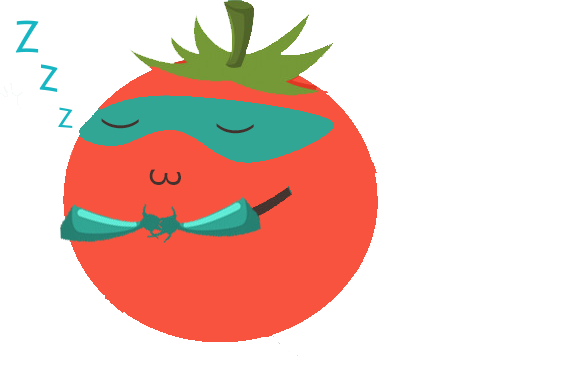
<style>
.page{position:relative;width:562px;height:381px;background:#ffffff}
.page>*{position:absolute;margin:0}
.t1{font:48px/32px "MicrosoftJhengHeiUIRegular";letter-spacing:-0.075em;color:#18b6c2}
.t2{font:40px/32px "MicrosoftJhengHeiUIRegular";letter-spacing:-0.075em;color:#18b6c2}
.t3{font:32px/32px "MicrosoftJhengHeiUIRegular";letter-spacing:-0.075em;color:#18b6c2}
.t4{font:40px "MicrosoftJhengHeiUIRegular";letter-spacing:-0.075em;color:#43312d}
.t5{font:40px "MicrosoftJhengHeiUIRegular";letter-spacing:-0.075em;color:#43312d;scale:0.87 1}
</style>
<div class="page">
<p class="t1" style="left:15px;top:20px;width:58px;height:108px;text-align:center">z<br>     <span class="t2">z<br>         </span><span class="t3">z</span></p>
<p class="t4" style="left:101px;top:118px;width:38px;height:11px;rotate:91deg">)</p>
<p class="t4" style="left:216px;top:123px;width:38px;height:11px;rotate:91deg">)</p>
<p class="t5" style="left:149px;top:169px;width:32px;height:16px;rotate:93deg">3</p>
</div>
